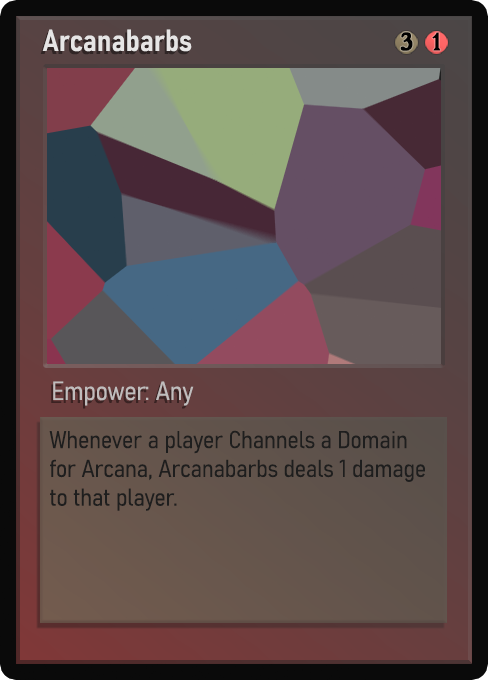
<style>
.page{position:relative;width:488px;height:680px}
.page>*{position:absolute;margin:0}
.t1{font:30px "Bahnschrift-SemiBoldSemiCondensed";color:#f2f2f2;font-weight:bold}
.t2{font:25px "WTRRoycroft";color:#000000;font-weight:bold;scale:1.09 1}
.t3{font:26px "Bahnschrift-LightSemiCondensed";color:#c8c8c8;font-weight:bold}
.t4{font:24px "Bahnschrift-LightSemiCondensed";color:#1e1e1e;font-weight:bold}
</style>
<div class="page">
<p class="t1" style="left:42px;top:29px;width:150px;height:23px;opacity:0.9">Arcanabarbs</p>
<p class="t2" style="left:400px;top:32px;width:13px;height:19px">3</p>
<p class="t2" style="left:432px;top:32px;width:9px;height:19px">1</p>
<p class="t3" style="left:53px;top:381px;width:141px;height:25px;opacity:0.9">Empower: Any</p>
<p class="t4" style="left:49px;top:430px;width:376px;height:81px">Whenever a player Channels a Domain for Arcana, Arcanabarbs deals 1 damage to that player.</p>
</div>
